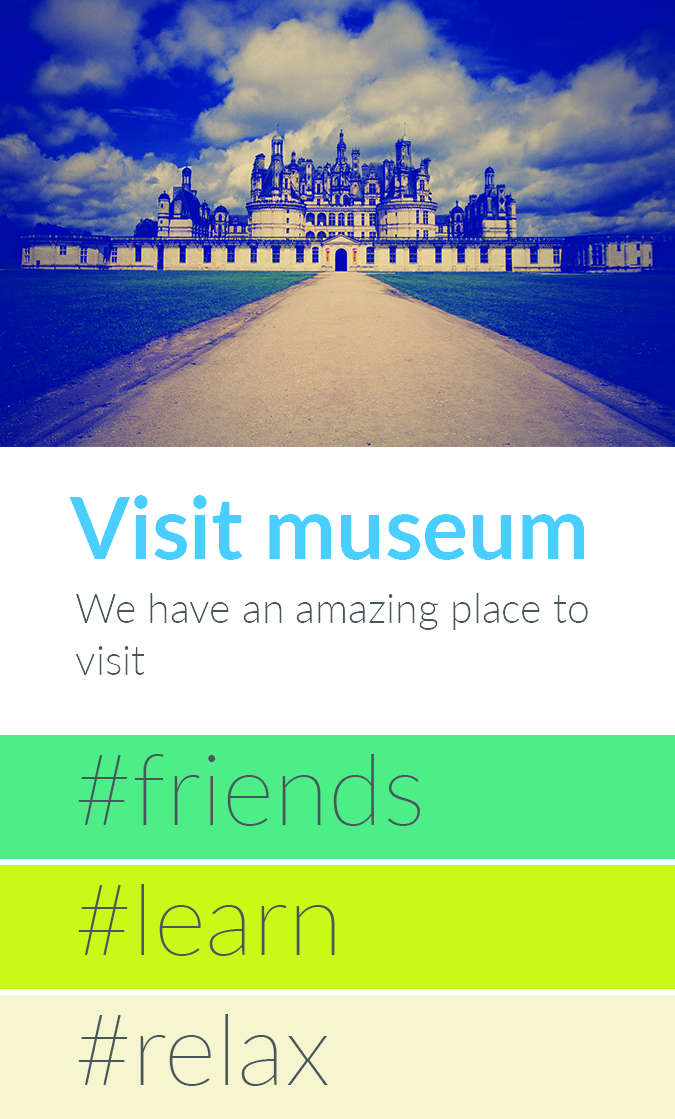
<style>
.page{position:relative;width:675px;height:1119px;background:#ffffff}
.page>*{position:absolute;margin:0}
.t1{font:86px "Lato-Bold";color:#4acdff}
.t2{font:41px/52px "Lato-Light";color:#48585a}
</style>
<div class="page">
<p class="t1" style="left:69px;top:495px;width:516px;height:65px">Visit museum</p>
<p class="t2" style="left:75px;top:593px;width:513px;height:82px;text-align:right">We have an amazing place to visit</p>
</div>
